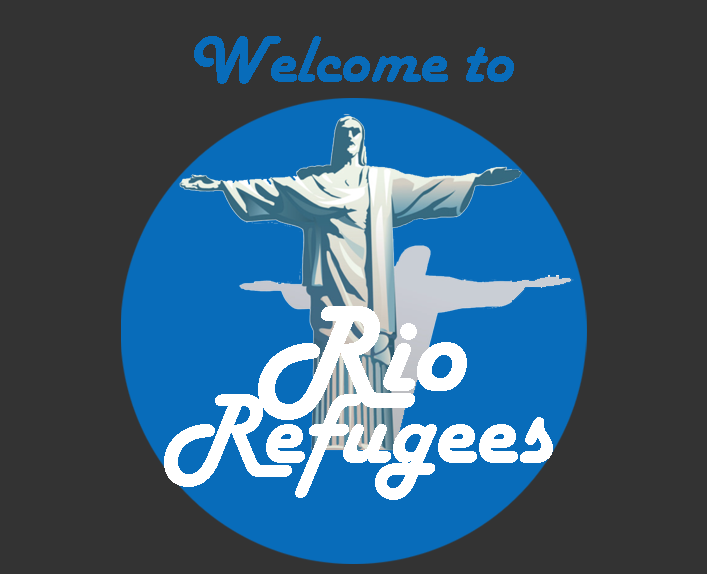
<style>
.page{position:relative;width:707px;height:574px;background:#333333}
.page>*{position:absolute;margin:0}
.t1{font:69px "HarlowSolid";color:#086cba}
.t2{font:128.1px "HarlowSolid";color:#ffffff}
.t3{font:104px "HarlowSolid";color:#ffffff}
</style>
<div class="page">
<p class="t1" style="left:194px;top:36px;width:320px;height:48px">Welcome to</p>
<p class="t2" style="left:258px;top:306px;width:209px;height:114px">Rio</p>
<p class="t3" style="left:164px;top:394px;width:389px;height:106px">Refugees</p>
</div>
